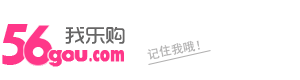
<style>
.page{position:relative;width:300px;height:80px;background:#ffffff}
.page>*{position:absolute;margin:0}
.t1{font:86.6px "Aharoni-Bold";color:#ff3789}
.t2{font:20.3px "TRENDS";color:#676666}
.t3{font:12px "SimHei";color:#b1b0b0}
.t4{font:24.3px "Aharoni-Bold";color:#ff3789;font-weight:bold}
.t5{font:24.1px "Aharoni-Bold";color:#ff3789;font-weight:bold;scale:0.67 1}
</style>
<div class="page">
<p class="t1" style="left:2px;top:24px;width:26px;height:41px">5</p>
<p class="t1" style="left:23px;top:25px;width:30px;height:41px">6</p>
<p class="t2" style="left:65px;top:27px;width:60px;height:17px">我乐购</p>
<p class="t3" style="left:147px;top:40px;width:53px;height:20px;rotate:-10deg">记住我哦！</p>
<p class="t4" style="left:48px;top:50px;width:14px;height:17px">g</p>
<p class="t4" style="left:61px;top:50px;width:15px;height:12px">o</p>
<p class="t4" style="left:74px;top:50px;width:14px;height:12px">u</p>
<p class="t5" style="left:89px;top:50px;width:35px;height:12px">.com</p>
</div>
